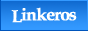
<style>
.page{position:relative;width:88px;height:31px}
.page>*{position:absolute;margin:0}
.t1{font:18px "PiratesBay";color:#ffffff;font-weight:bold}
</style>
<div class="page">
<p class="t1" style="left:11px;top:7px;width:66px;height:16px">Linkeros</p>
</div>
